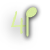
<style>
.page{position:relative;width:50px;height:50px;background:#ffffff}
.page>*{position:absolute;margin:0}
.t1{font:36px "DKCrayonCrumble";color:#dbefa0}
</style>
<div class="page">
<p class="t1" style="left:11px;top:11px;width:15px;height:23px">4</p>
</div>
